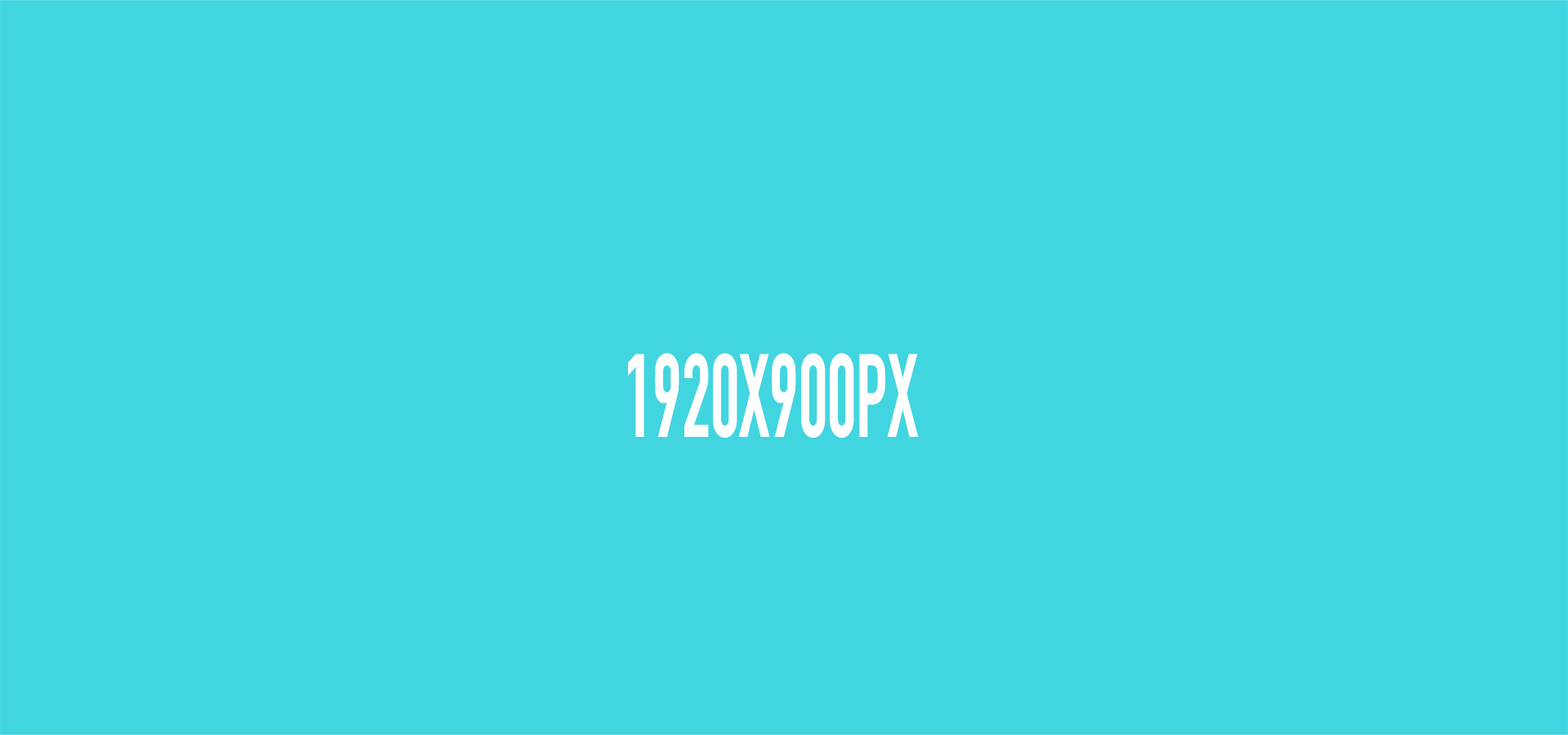
<style>
.page{position:relative;width:1568px;height:735px;background:#41d5e0}
.page>*{position:absolute;margin:0}
.t1{font:116.4px "DINCondensed-Bold";color:#ffffff;text-transform:uppercase;scale:0.67 1}
</style>
<div class="page">
<p class="t1" style="left:628px;top:353px;width:291px;height:85px">1920X900PX</p>
</div>
